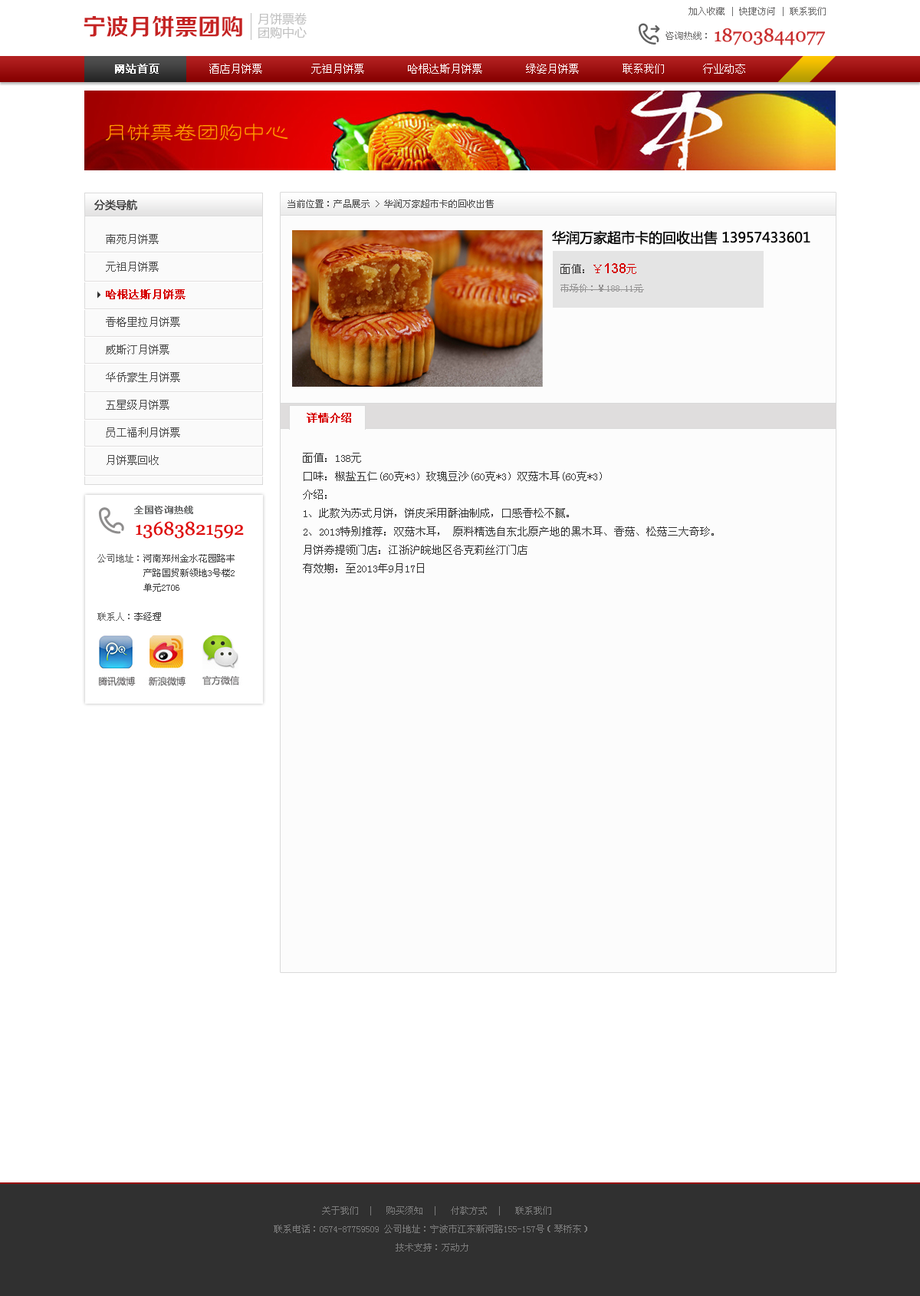
<style>
.page{position:relative;width:920px;height:1296px;background:#ffffff}
.page>*{position:absolute;margin:0}
.t1{font:23px "FZZZHONGJW--GB1-0";color:#c42323}
.t2{font:12.3px/13.8px "MicrosoftYaHei";color:#c0c0c0}
.t3{font:9.2px "SimSun";color:#717070}
.t4{font:18.4px "Georgia";color:#c93030}
.t5{font:10.7px "SimSun";color:#ffffff}
.t6{font:10.7px "SimSun";color:#ffffff;font-weight:bold}
.t7{font:23px "FZTJLSJW--GB1-0";color:#ff9c00}
.t8{font:10.7px "MicrosoftYaHei";color:#303030}
.t9{font:9.2px "NSimSun";color:#4e4e4e}
.t10{font:10.7px/27.6px "NSimSun";color:#4b4b4b}
.t11{font:10.7px/27.6px "NSimSun";color:#d60000;font-weight:bold}
.t12{font:13.8px "MicrosoftYaHei";color:#010101}
.t13{font:9.2px/18.4px "NSimSun";color:#949393}
.t14{font:10.7px/18.4px "NSimSun";color:#3c3b3b}
.t15{font:10.7px/18.4px "NSimSun";color:#d60000}
.t16{font:13.8px/18.4px "ArialMT";color:#d60000}
.t17{font:10.7px "NSimSun";color:#d60000;font-weight:bold}
.t18{font:10.7px/18.4px "NSimSun";color:#343434}
.t19{font:9.2px "NSimSun";color:#737474;font-weight:bold}
.t20{font:18.4px "Georgia";color:#de0c0c}
.t21{font:9.2px/14.6px "NSimSun";color:#454545}
.t22{font:9.2px/14.6px "NSimSun";color:#626262}
.t23{font:9.2px/18.4px "NSimSun";color:#7a7a7a}
</style>
<div class="page">
<p class="t1" style="left:84px;top:16px;width:158px;height:21px">宁波月饼票团购</p>
<p class="t2" style="left:258px;top:12px;width:49px;height:26px">月饼票卷<br>团购中心</p>
<p class="t3" style="left:689px;top:7px;width:137px;height:9px">加入收藏 | 快捷访问 | 联系我们</p>
<p class="t4" style="left:715px;top:28px;width:110px;height:17px">18703844077</p>
<p class="t3" style="left:666px;top:31px;width:41px;height:9px">咨询热线：</p>
<p class="t5" style="left:115px;top:64px;width:631px;height:10px"><span class="t6">网站首页        </span>酒店月饼票         元祖月饼票        哈根达斯月饼票        绿姿月饼票        联系我们       行业动态</p>
<p class="t7" style="left:105px;top:123px;width:183px;height:18px">月饼票卷团购中心</p>
<p class="t8" style="left:94px;top:199px;width:43px;height:11px">分类导航</p>
<p class="t9" style="left:288px;top:199px;width:206px;height:9px">当前位置：产品展示 &gt; 华润万家超市卡的回收出售</p>
<p class="t10" style="left:106px;top:234px;width:80px;height:231px">南苑月饼票<br>元祖月饼票<br><span class="t11">哈根达斯月饼票<br></span>香格里拉月饼票<br>威斯汀月饼票<br>华侨豪生月饼票<br>五星级月饼票<br>员工福利月饼票<br>月饼票回收</p>
<p class="t12" style="left:552px;top:230px;width:259px;height:15px">华润万家超市卡的回收出售 13957433601</p>
<p class="t13" style="left:561px;top:263px;width:83px;height:29px"><span class="t14">面值：</span><span class="t15">￥</span><span class="t16">138</span><span class="t15">元<br></span>市场价：￥188.11元</p>
<p class="t17" style="left:307px;top:413px;width:44px;height:10px">详情介绍</p>
<p class="t18" style="left:303px;top:453px;width:411px;height:120px">面值：138元<br>口味：椒盐五仁(60克*3）玫瑰豆沙(60克*3）双菇木耳(60克*3）<br>介绍：<br>1、此款为苏式月饼，饼皮采用酥油制成，口感香松不腻。<br>2、2013特别推荐：双菇木耳， 原料精选自东北原产地的黑木耳、香菇、松菇三大奇珍。<br>月饼券提领门店：江浙沪皖地区各克莉丝汀门店<br>有效期：至2013年9月17日</p>
<p class="t19" style="left:134px;top:505px;width:59px;height:9px">全国咨询热线</p>
<p class="t20" style="left:136px;top:521px;width:108px;height:17px">13683821592</p>
<p class="t21" style="left:97px;top:554px;width:138px;height:67px"><span class="t22">公司地址：</span>河南郑州金水花园路丰<br>     产路国贸新领地3号楼2<br>     单元2706<br><span class="t22">  <br>联系人：</span>李经理</p>
<p class="t23" style="left:274px;top:1206px;width:314px;height:45px;text-align:center">关于我们  |   购买须知  |   付款方式  |   联系我们<br>联系电话：0574-87759509 公司地址：宁波市江东新河路155-157号（琴桥东）<br>技术支持：万动力</p>
</div>
